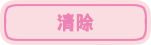
<style>
.page{position:relative;width:151px;height:45px;background:#f9dde0}
.page>*{position:absolute;margin:0}
.t1{font:12px "shetumodengxiaofangti";color:#eb84b4;font-weight:bold;scale:0.94 1}
</style>
<div class="page">
<p class="t1" style="left:57px;top:13px;width:37px;height:19px">清除</p>
</div>
